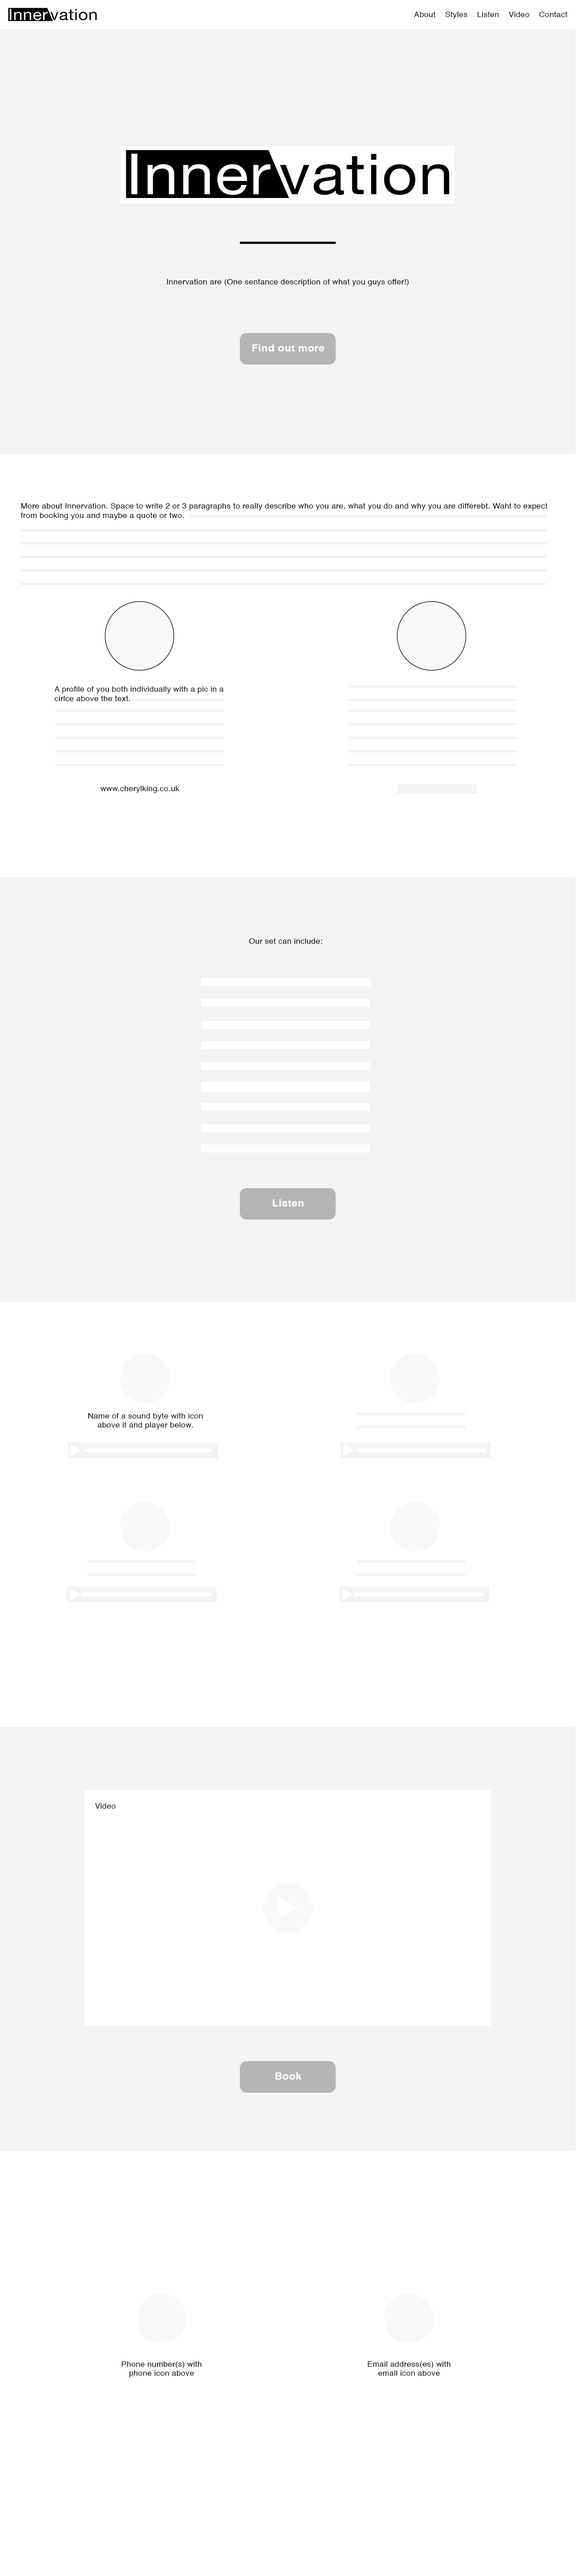
<style>
.page{position:relative;width:576px;height:2576px;background:#ffffff}
.page>*{position:absolute;margin:0}
.t1{font:7.3px "Helvetica";letter-spacing:0.02em;color:#000000;scale:1.08 1}
.t2{font:9.8px "Helvetica-Bold";letter-spacing:0.02em;color:#ffffff;scale:1.08 1}
.t3{font:7.3px/9.4px "Helvetica";letter-spacing:0.02em;color:#000000;scale:1.08 1}
</style>
<div class="page">
<p class="t1" style="left:414px;top:12px;width:153px;height:7px">About    Styles    Listen    Video    Contact</p>
<p class="t1" style="left:167px;top:279px;width:242px;height:7px">Innervation are (One sentance description of what you guys offer!)</p>
<p class="t2" style="left:252px;top:344px;width:72px;height:7px">Find out more</p>
<p class="t3" style="left:21px;top:503px;width:527px;height:17px">More about Innervation. Space to write 2 or 3 paragraphs to really describe who you are, what you do and why you are differebt. Waht to expect from booking you and maybe a quote or two.</p>
<p class="t3" style="left:54px;top:686px;width:170px;height:15px">A profile of you both individually with a pic in a cirlce above the text.</p>
<p class="t1" style="left:100px;top:786px;width:80px;height:7px">www.cherylking.co.uk</p>
<p class="t1" style="left:249px;top:938px;width:73px;height:6px">Our set can include:</p>
<p class="t2" style="left:273px;top:1199px;width:31px;height:8px">Listen</p>
<p class="t3" style="left:88px;top:1413px;width:115px;height:16px;text-align:center">Name of a sound byte with icon above it and player below.</p>
<p class="t1" style="left:95px;top:1803px;width:21px;height:6px">Video</p>
<p class="t2" style="left:275px;top:2072px;width:27px;height:8px">Book</p>
<p class="t3" style="left:122px;top:2361px;width:80px;height:17px;text-align:center">Phone number(s) with phone icon above</p>
<p class="t3" style="left:368px;top:2361px;width:82px;height:15px;text-align:center">Email address(es) with email icon above</p>
</div>
